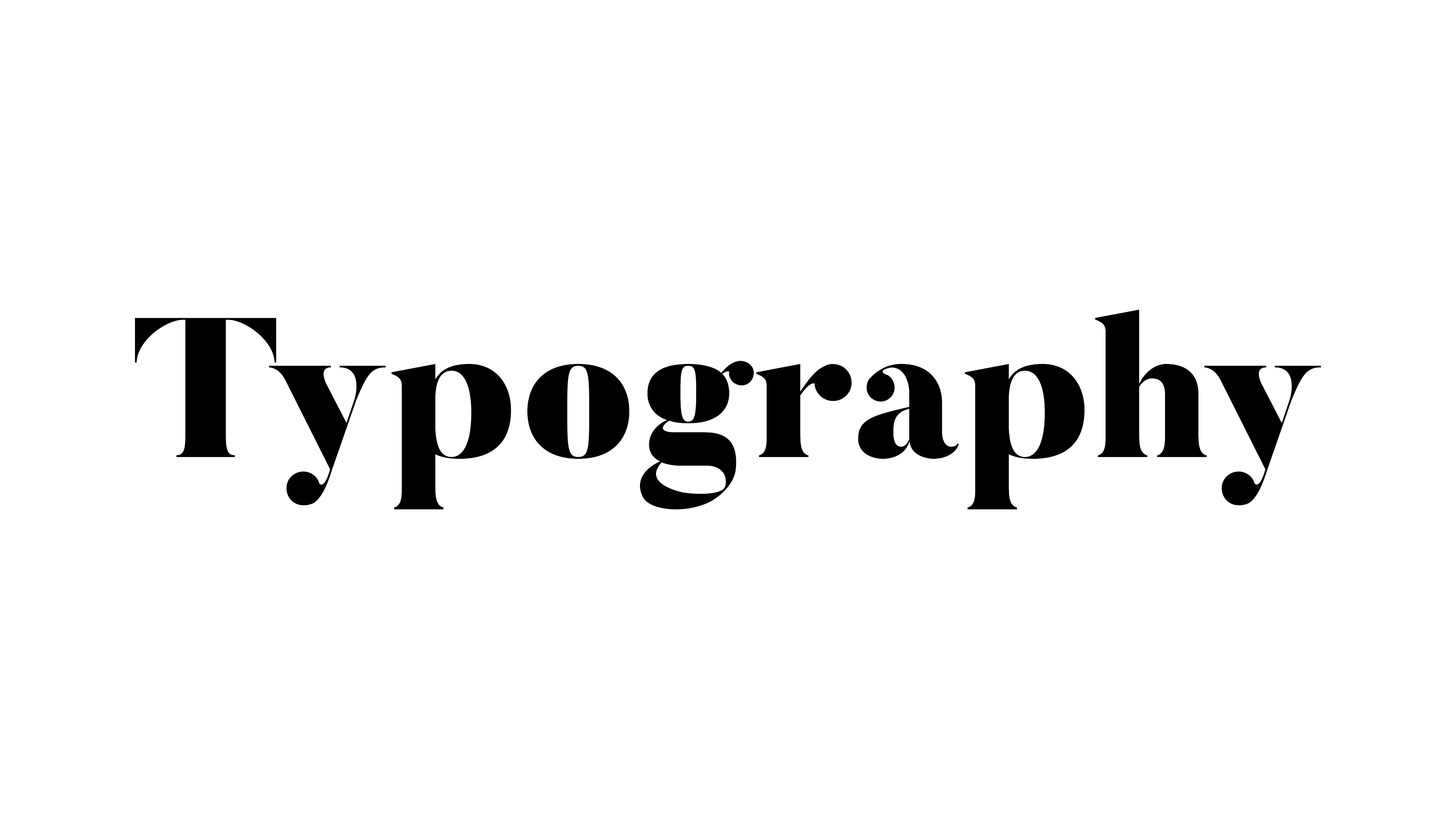
<style>
.page{position:relative;width:1456px;height:819px;background:#ffffff}
.page>*{position:absolute;margin:0}
.t1{font:197.5px "Butler-Black";color:#000000}
</style>
<div class="page">
<p class="t1" style="left:135px;top:309px;width:1186px;height:201px">Typography</p>
</div>
